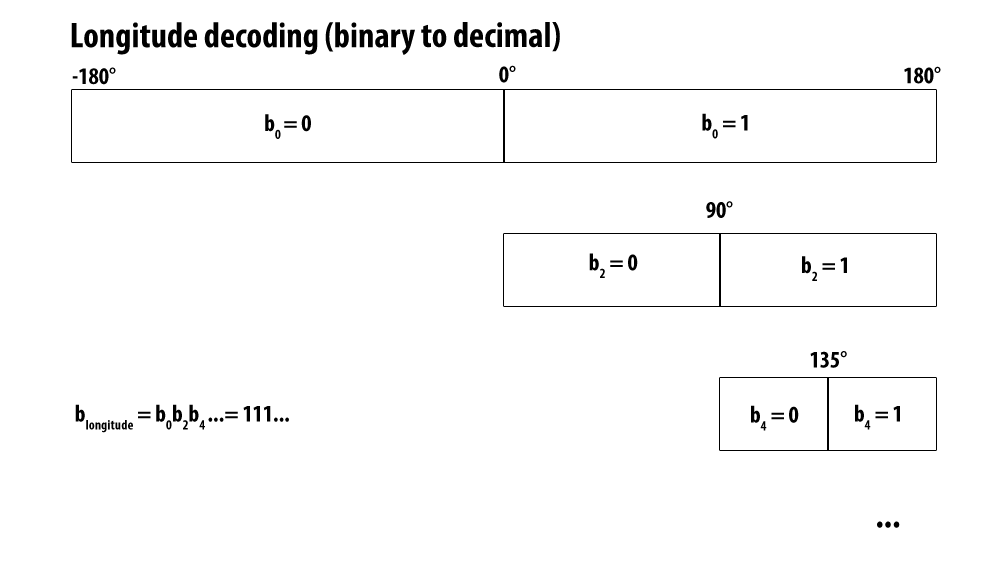
<style>
.page{position:relative;width:1008px;height:576px;background:#ffffff}
.page>*{position:absolute;margin:0}
.t1{font:36px "MyriadPro-BoldCond";color:#000000}
.t2{font:24px "MyriadPro-BoldCond";color:#000000}
</style>
<div class="page">
<p class="t1" style="left:71px;top:22px;width:489px;height:33px">Longitude decoding (binary to decimal)</p>
<p class="t2" style="left:499px;top:65px;width:17px;height:18px">0°</p>
<p class="t2" style="left:72px;top:67px;width:44px;height:18px">-180°</p>
<p class="t2" style="left:904px;top:66px;width:37px;height:18px">180°</p>
<p class="t2" style="left:702px;top:113px;width:46px;height:26px">b0 = 1</p>
<p class="t2" style="left:265px;top:114px;width:46px;height:25px">b0 = 0</p>
<p class="t2" style="left:706px;top:201px;width:27px;height:17px">90°</p>
<p class="t2" style="left:589px;top:253px;width:49px;height:25px">b2 = 0</p>
<p class="t2" style="left:802px;top:256px;width:45px;height:25px">b2 = 1</p>
<p class="t2" style="left:810px;top:351px;width:37px;height:17px">135°</p>
<p class="t2" style="left:75px;top:404px;width:214px;height:29px">blongitude = b0b2b4 ...= 111...</p>
<p class="t2" style="left:751px;top:405px;width:48px;height:26px">b4 = 0</p>
<p class="t2" style="left:855px;top:404px;width:45px;height:26px">b4 = 1</p>
<p class="t1" style="left:877px;top:521px;width:23px;height:7px">...</p>
</div>
